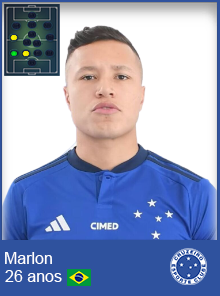
<style>
.page{position:relative;width:220px;height:296px;background:#ffffff}
.page>*{position:absolute;margin:0}
.t1{font:16px "ArialMT";color:#ffffff}
</style>
<div class="page">
<p class="t1" style="left:5px;top:252px;width:47px;height:12px">Marlon</p>
<p class="t1" style="left:5px;top:270px;width:57px;height:12px">26 anos</p>
</div>
